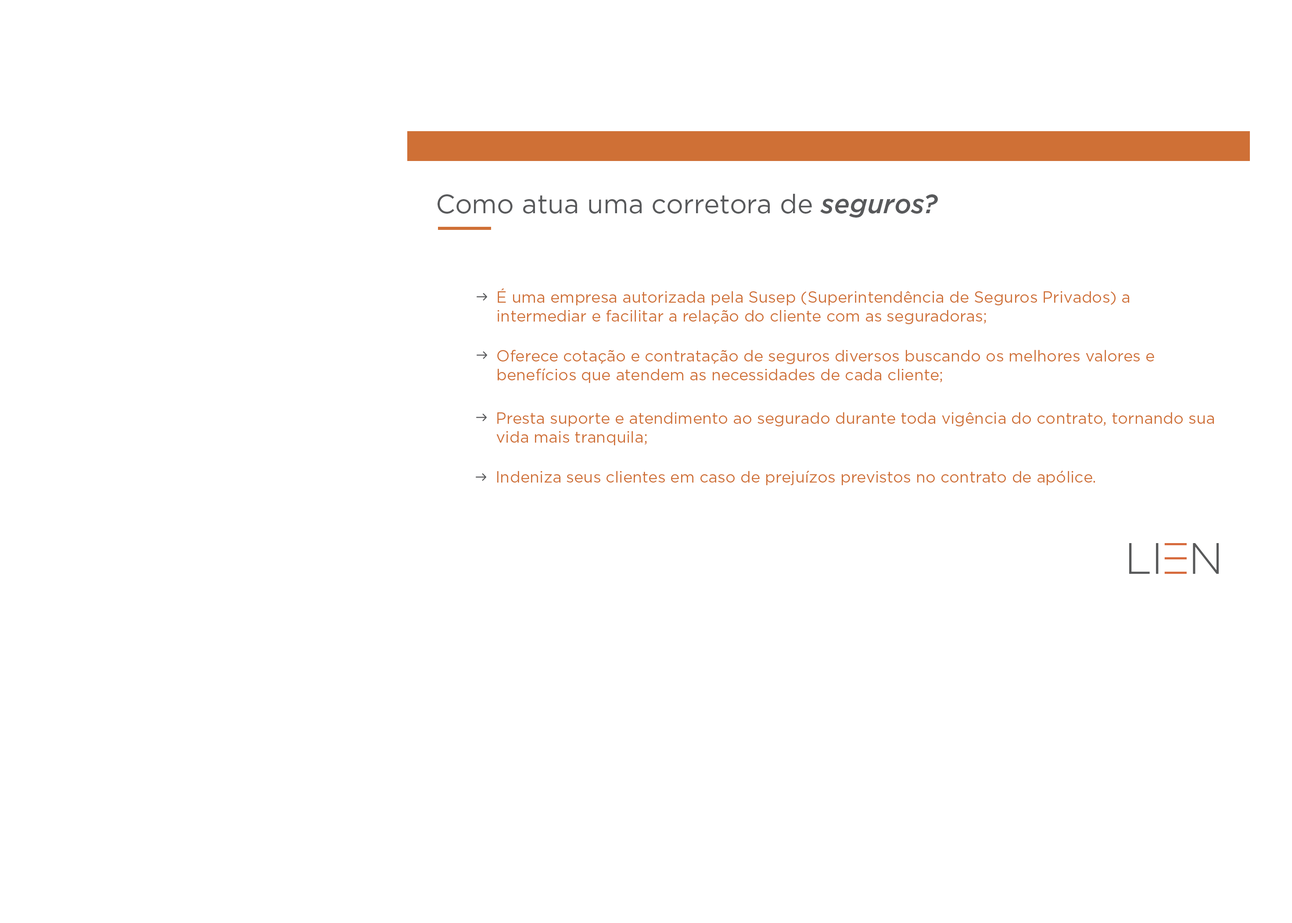
<style>
.page{position:relative;width:1292px;height:923px;background:#ffffff}
.page>*{position:absolute;margin:0}
.t1{font:26.3px "Gotham-Book";color:#58595b}
.t2{font:26.3px "Gotham-MediumItalic";color:#58595b}
.t3{font:15.8px "Gotham-Book";color:#cf7036}
</style>
<div class="page">
<p class="t1" style="left:437px;top:193px;width:501px;height:25px">Como atua uma corretora de <span class="t2">seguros?</span></p>
<p class="t3" style="left:498px;top:288px;width:631px;height:36px">É uma empresa autorizada pela Susep (Superintendência de Seguros Privados) a intermediar e facilitar a relação do cliente com as seguradoras;</p>
<p class="t3" style="left:497px;top:350px;width:657px;height:33px">Oferece cotação e contratação de seguros diversos buscando os melhores valores e benefícios que atendem as necessidades de cada cliente;</p>
<p class="t3" style="left:496px;top:412px;width:718px;height:33px">Presta suporte e atendimento ao segurado durante toda vigência do contrato, tornando sua vida mais tranquila;</p>
<p class="t3" style="left:497px;top:470px;width:598px;height:15px">Indeniza seus clientes em caso de prejuízos previstos no contrato de apólice.</p>
</div>
